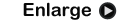
<style>
.page{position:relative;width:120px;height:21px;background:#ffffff}
.page>*{position:absolute;margin:0}
.t1{font:18.1px "ArialRoundedMTBold";color:#090909}
</style>
<div class="page">
<p class="t1" style="left:23px;top:2px;width:68px;height:18px">Enlarge</p>
</div>
